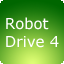
<style>
.page{position:relative;width:64px;height:64px}
.page>*{position:absolute;margin:0}
.t1{font:14.9px "Verdana";color:#ffffff}
</style>
<div class="page">
<p class="t1" style="left:6px;top:17px;width:53px;height:31px">Robot<br>Drive 4</p>
</div>
